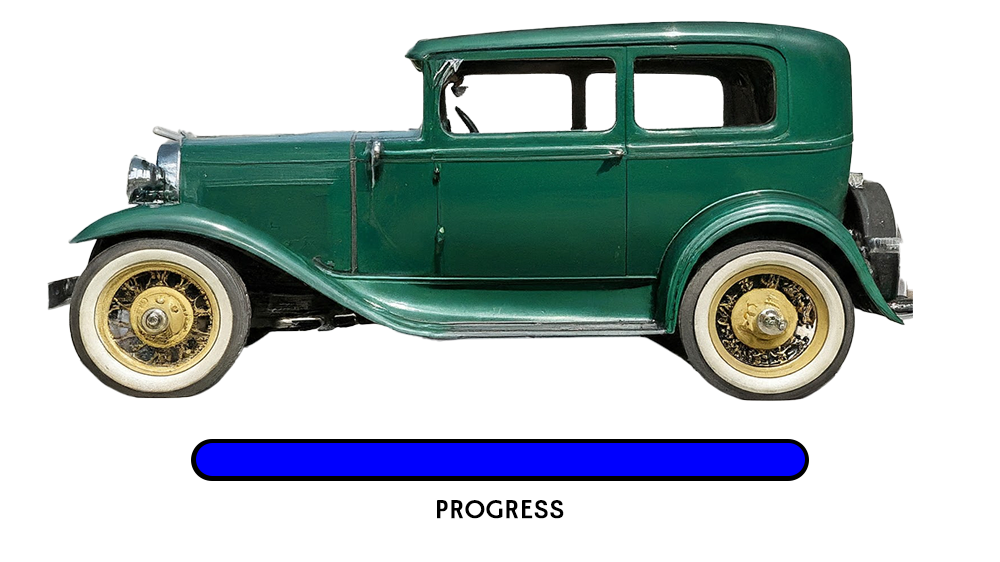
<style>
.page{position:relative;width:1000px;height:562px;background:#ffffff}
.page>*{position:absolute;margin:0}
.t1{font:25px "ModecoTrial-Regular";color:#000000;font-weight:bold}
</style>
<div class="page">
<p class="t1" style="left:437px;top:500px;width:127px;height:19px">PROGRESS</p>
</div>
